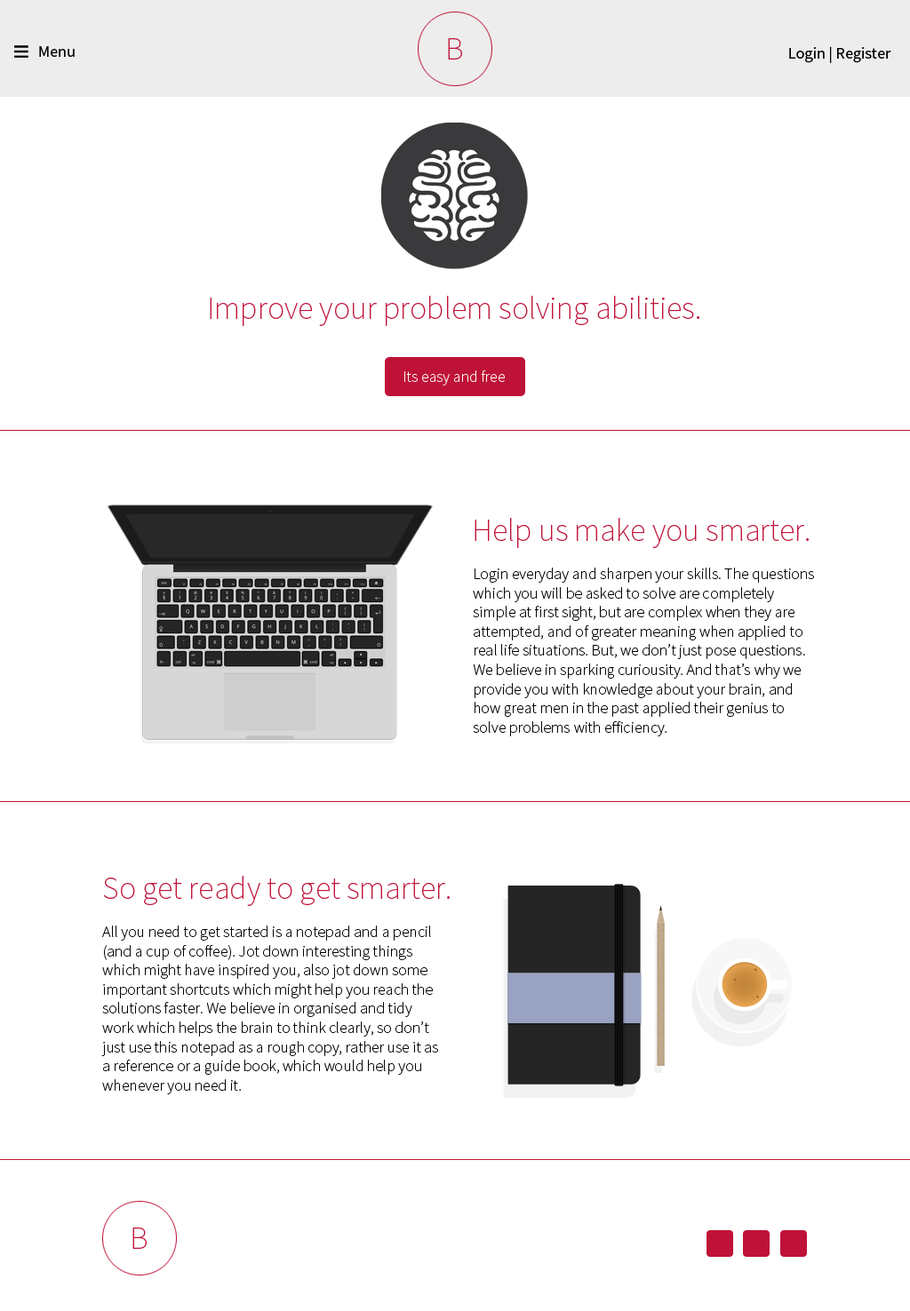
<style>
.page{position:relative;width:910px;height:1311px;background:#ffffff}
.page>*{position:absolute;margin:0}
.t1{font:32px "SourceSansPro-ExtraLight";color:#bf1238}
.t2{font:16px "SourceSansPro-Regular";color:#000000}
.t3{font:16px "SourceSansPro-ExtraLight";color:#ffffff}
.t4{font:16px "SourceSansPro-ExtraLight";color:#000000}
</style>
<div class="page">
<p class="t1" style="left:448px;top:38px;width:14px;height:22px">B</p>
<p class="t2" style="left:39px;top:46px;width:36px;height:11px">Menu</p>
<p class="t2" style="left:789px;top:46px;width:102px;height:17px">Login | Register</p>
<p class="t1" style="left:210px;top:296px;width:489px;height:30px">Improve your problem solving abilities.</p>
<p class="t3" style="left:404px;top:370px;width:101px;height:15px">Its easy and free</p>
<p class="t1" style="left:474px;top:518px;width:334px;height:30px">Help us make you smarter.</p>
<p class="t4" style="left:473px;top:568px;width:341px;height:168px">Login everyday and sharpen your skills. The questions which you will be asked to solve are completely simple at first sight, but are complex when they are attempted, and of greater meaning when applied to real life situations. But, we don’t just pose questions. We believe in sparking curiousity. And that’s why we provide you with knowledge about your brain, and how great men in the past applied their genius to solve problems with efficiency.</p>
<p class="t1" style="left:103px;top:876px;width:346px;height:30px">So get ready to get smarter.</p>
<p class="t4" style="left:101px;top:926px;width:337px;height:168px">All you need to get started is a notepad and a pencil (and a cup of coffee). Jot down interesting things which might have inspired you, also jot down some important shortcuts which might help you reach the solutions faster. We believe in organised and tidy work which helps the brain to think clearly, so don’t just use this notepad as a rough copy, rather use it as a reference or a guide book, which would help you whenever you need it.</p>
<p class="t1" style="left:132px;top:1228px;width:15px;height:21px">B</p>
</div>
